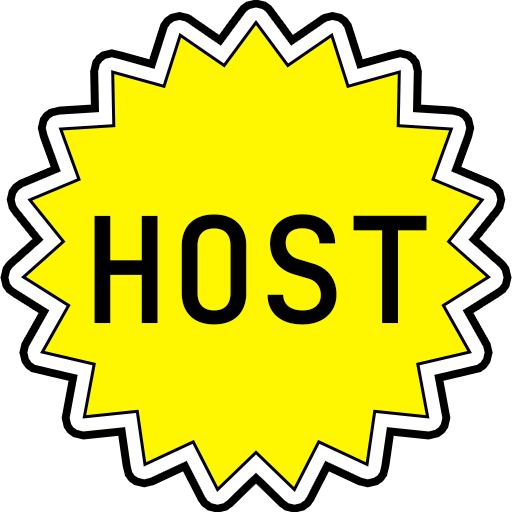
<style>
.page{position:relative;width:512px;height:512px;background:#fff601}
.page>*{position:absolute;margin:0}
.t1{font:146.7px "JetBrainsMonoRoman-Medium";color:#000000}
</style>
<div class="page">
<p class="t1" style="left:94px;top:214px;width:333px;height:111px">HOST</p>
</div>
